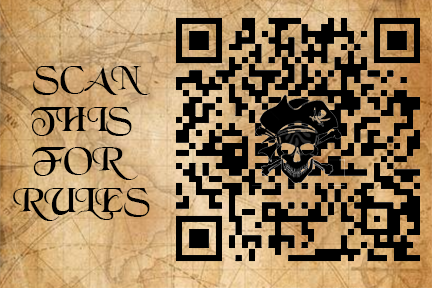
<style>
.page{position:relative;width:432px;height:288px;background:#000000}
.page>*{position:absolute;margin:0}
.t1{font:33.8px "BlackChancery";color:#000000}
</style>
<div class="page">
<p class="t1" style="left:13px;top:66px;width:137px;height:155px;text-align:center">SCAN<br>THIS<br>FOR <br>RULES</p>
</div>
